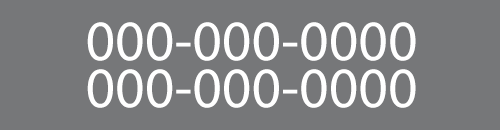
<style>
.page{position:relative;width:500px;height:130px;background:#767779}
.page>*{position:absolute;margin:0}
.t1{font:57.8px "MyriadPro-Regular";color:#ffffff}
</style>
<div class="page">
<p class="t1" style="left:87px;top:22px;width:329px;height:39px">000-000-0000</p>
<p class="t1" style="left:87px;top:69px;width:329px;height:39px">000-000-0000</p>
</div>
